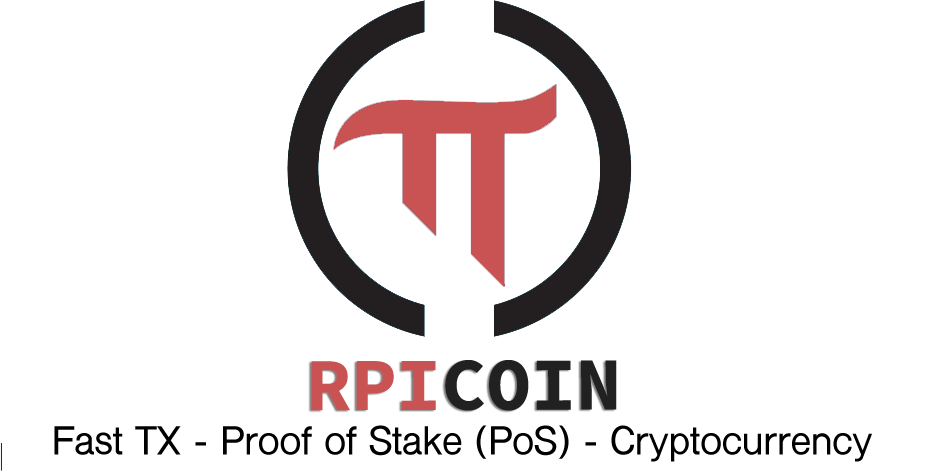
<style>
.page{position:relative;width:926px;height:472px;background:#ffffff}
.page>*{position:absolute;margin:0}
.t1{font:75px "SourceCodePro-Bold";color:#212121}
.t2{font:75px "SourceCodePro-Bold";color:#c95353}
.t3{font:37.5px "ShreeDev0714-Bold";color:#000000}
</style>
<div class="page">
<p class="t1" style="left:311px;top:360px;width:306px;height:51px"><span class="t2">RPI</span>COIN</p>
<p class="t3" style="left:54px;top:425px;width:818px;height:37px">Fast TX - Proof of Stake (PoS) - Cryptocurrency</p>
</div>
